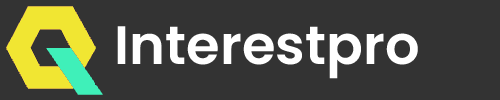
<style>
.page{position:relative;width:500px;height:100px;background:#333333}
.page>*{position:absolute;margin:0}
.t1{font:54px "Poppins-SemiBold";color:#ffffff}
</style>
<div class="page">
<p class="t1" style="left:117px;top:26px;width:301px;height:53px">Interestpro</p>
</div>
